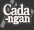
<style>
.page{position:relative;width:34px;height:30px;background:#333333}
.page>*{position:absolute;margin:0}
.t1{font:12px/9px "RyuminPro-ExBold";letter-spacing:-0.08em;color:#fff6f2;scale:0.9 1}
.t2{font:14px/9px "RyuminPro-ExBold";letter-spacing:-0.08em;color:#fff6f2;scale:0.9 1}
</style>
<div class="page">
<p class="t1" style="left:3px;top:4px;width:28px;height:21px;text-align:right"><span class="t2">Cada<br></span>-ngan</p>
</div>
